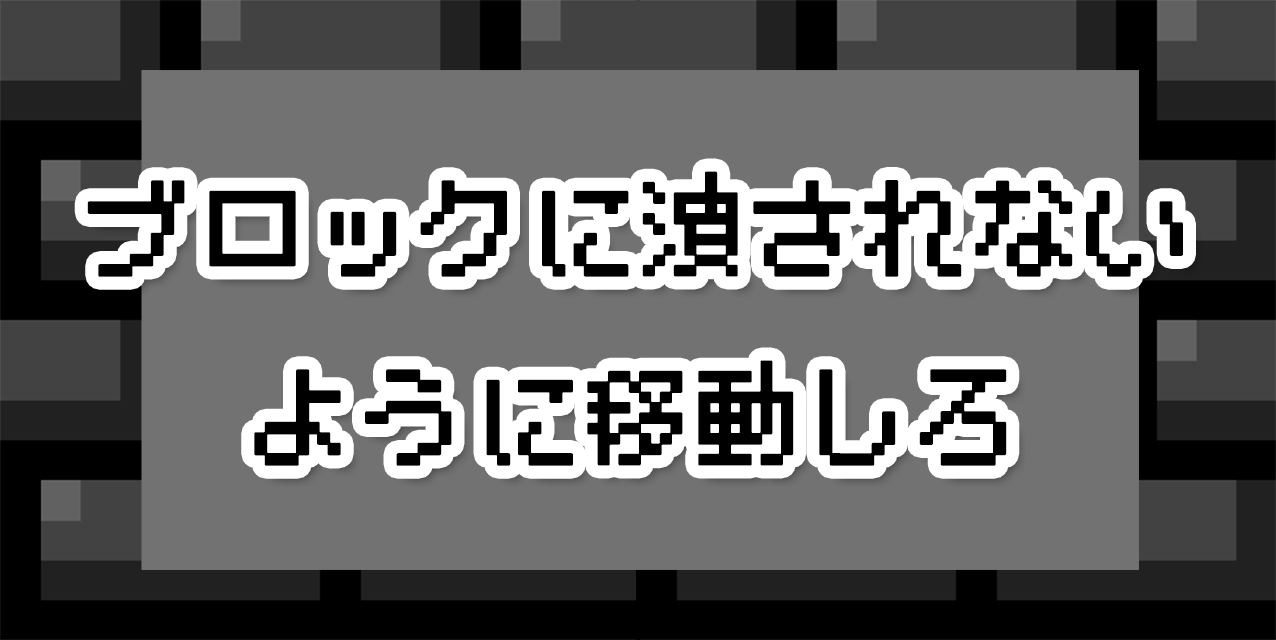
<style>
.page{position:relative;width:1276px;height:640px;background:#727272}
.page>*{position:absolute;margin:0}
.t1{font:108px "BestTen-CRT";color:#000000;font-weight:bold}
</style>
<div class="page">
<p class="t1" style="left:87px;top:171px;width:1096px;height:295px;text-align:center">ブロックに潰されない<br>ように移動しろ</p>
</div>
